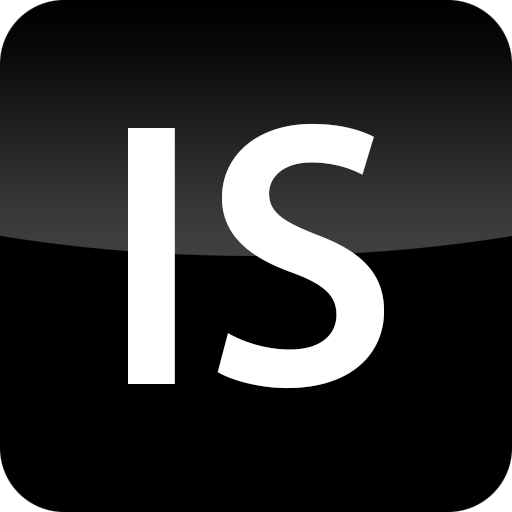
<style>
.page{position:relative;width:512px;height:512px;background:#000000}
.page>*{position:absolute;margin:0}
.t1{font:380px "MyriadPro-Semibold";color:#ffffff}
</style>
<div class="page">
<p class="t1" style="left:128px;top:123px;width:256px;height:266px">IS</p>
</div>
